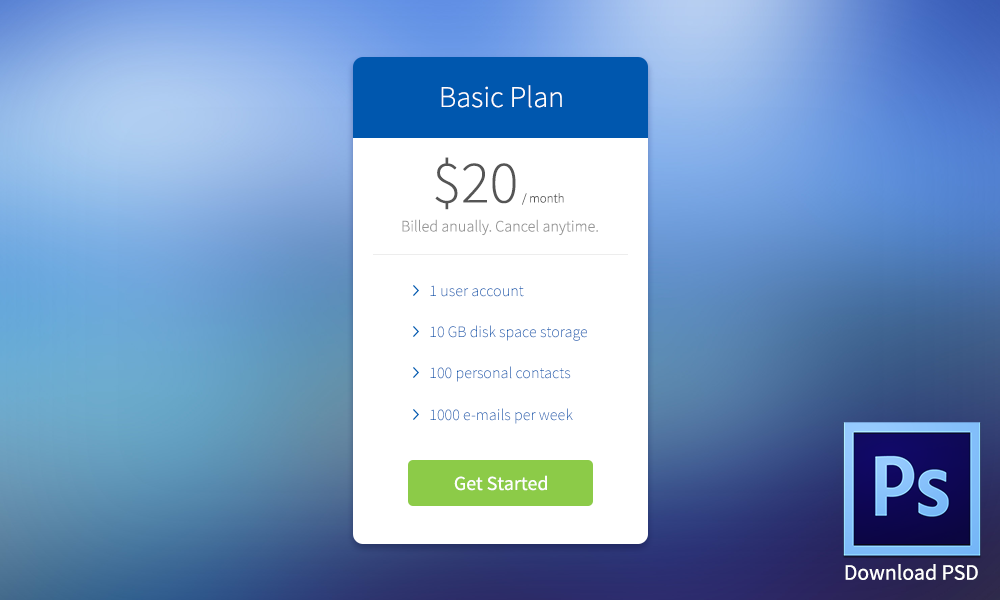
<style>
.page{position:relative;width:1000px;height:600px}
.page>*{position:absolute;margin:0}
.t1{font:30px "SourceSansPro-Light";color:#fefefe}
.t2{font:13px "SourceSansPro-Light";color:#555555}
.t3{font:60px "SourceSansPro-Light";color:#555555}
.t4{font:16px "SourceSansPro-Light";color:#959595}
.t5{font:16px "SourceSansPro-Light"}
.t6{font:16px "SourceSansPro-Light";color:#0057ae}
.t7{font:20px "SourceSansPro-Regular";color:#fefefe}
.t8{font:22px "SourceSansPro-Regular";color:#ffffff}
</style>
<div class="page">
<p class="t1" style="left:441px;top:85px;width:121px;height:23px">Basic Plan</p>
<p class="t2" style="left:435px;top:157px;width:129px;height:53px"><span class="t3">$20 </span>/ month</p>
<p class="t4" style="left:402px;top:219px;width:196px;height:17px">Billed anually. Cancel anytime.</p>
<p class="t5" style="left:430px;top:285px;width:94px;height:12px">1 user account</p>
<p class="t6" style="left:430px;top:325px;width:157px;height:16px">10 GB disk space storage</p>
<p class="t6" style="left:430px;top:366px;width:141px;height:16px">100 personal contacts</p>
<p class="t5" style="left:430px;top:408px;width:143px;height:16px">1000 e-mails per week</p>
<p class="t7" style="left:454px;top:475px;width:93px;height:16px">Get Started</p>
<p class="t8" style="left:845px;top:564px;width:133px;height:16px">Download PSD</p>
</div>
